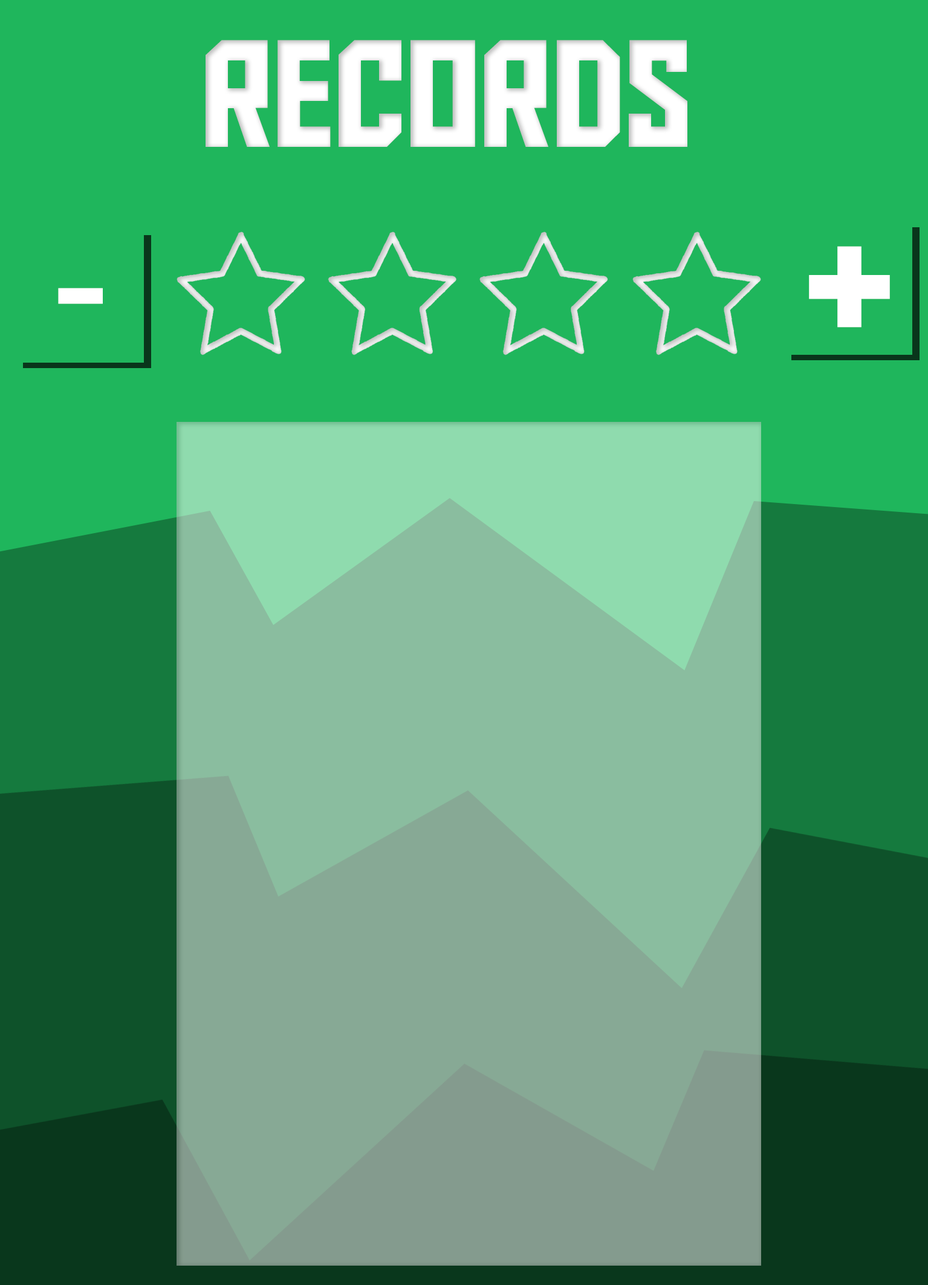
<style>
.page{position:relative;width:928px;height:1285px;background:#1fb65c}
.page>*{position:absolute;margin:0}
.t1{font:151.1px "AldotheApache";color:#ffffff}
.t2{font:151.1px "AldotheApache";color:#ffffff;scale:1.4 1}
</style>
<div class="page">
<p class="t1" style="left:206px;top:40px;width:481px;height:107px">RECORDS</p>
<p class="t1" style="left:809px;top:246px;width:81px;height:82px">+</p>
<p class="t2" style="left:58px;top:288px;width:45px;height:16px">-</p>
</div>
